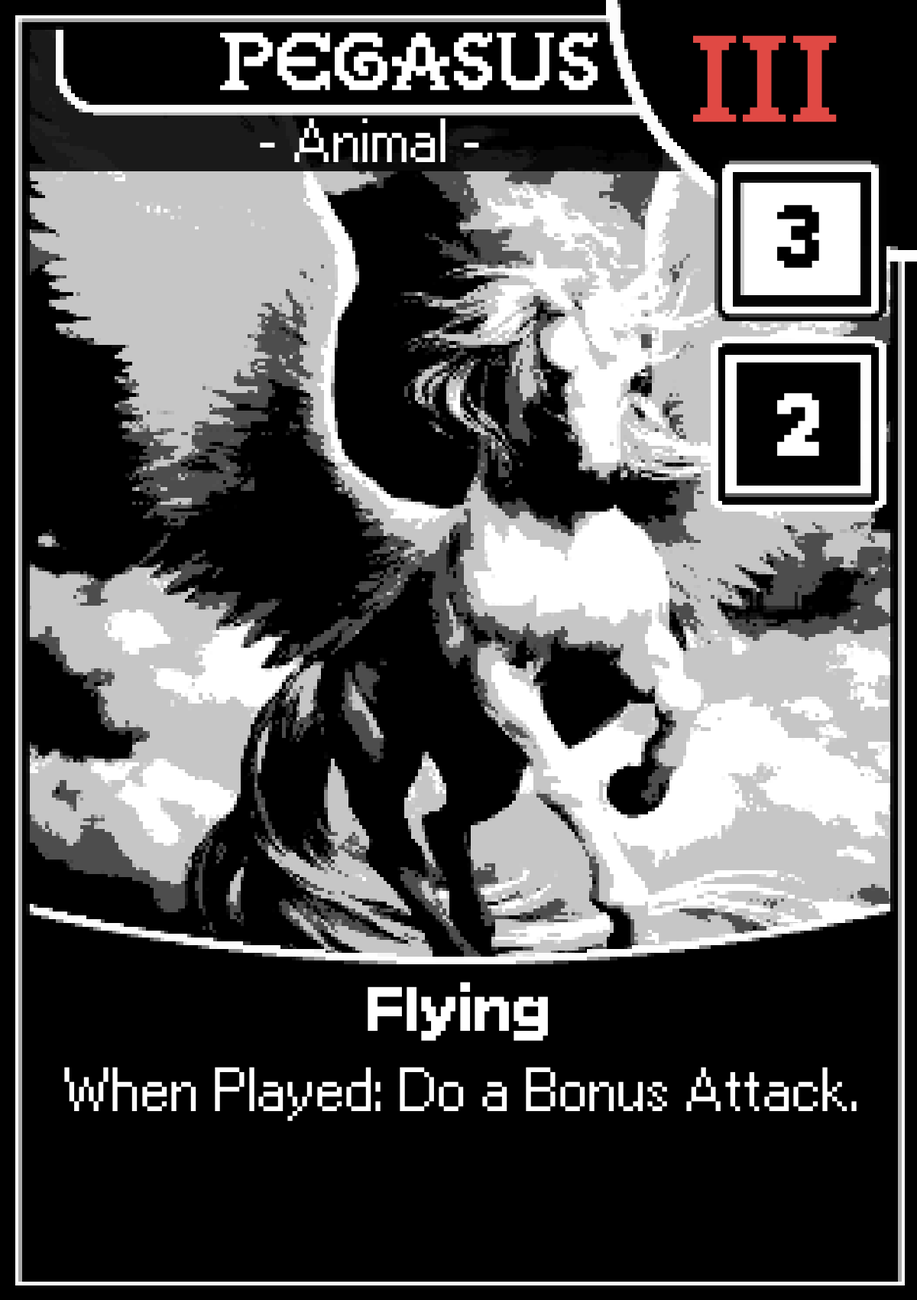
<style>
.page{position:relative;width:917px;height:1300px;background:#000000}
.page>*{position:absolute;margin:0}
.t1{font:76.5px "GallaeciaForte";color:#ffffff}
.t2{font:114.7px "GallaeciaForte";color:#e04944}
.t3{font:53.5px "Ari-W9500-Regular";color:#ffffff}
.t4{font:76.5px "AriW9500-Condensed-Display";color:#000000}
.t5{font:76.5px "AriW9500-Condensed-Display";color:#ffffff}
.t6{font:53.5px "Ari-W9500-Display";color:#ffffff}
</style>
<div class="page">
<p class="t1" style="left:220px;top:32px;width:378px;height:58px">Pegasus</p>
<p class="t2" style="left:693px;top:35px;width:144px;height:87px">III</p>
<p class="t3" style="left:260px;top:118px;width:219px;height:44px">- Animal -</p>
<p class="t4" style="left:778px;top:205px;width:42px;height:63px">3</p>
<p class="t5" style="left:778px;top:393px;width:42px;height:63px">2</p>
<p class="t6" style="left:368px;top:982px;width:180px;height:59px">Flying</p>
<p class="t3" style="left:64px;top:1067px;width:793px;height:54px">When Played: Do a Bonus Attack.</p>
</div>
